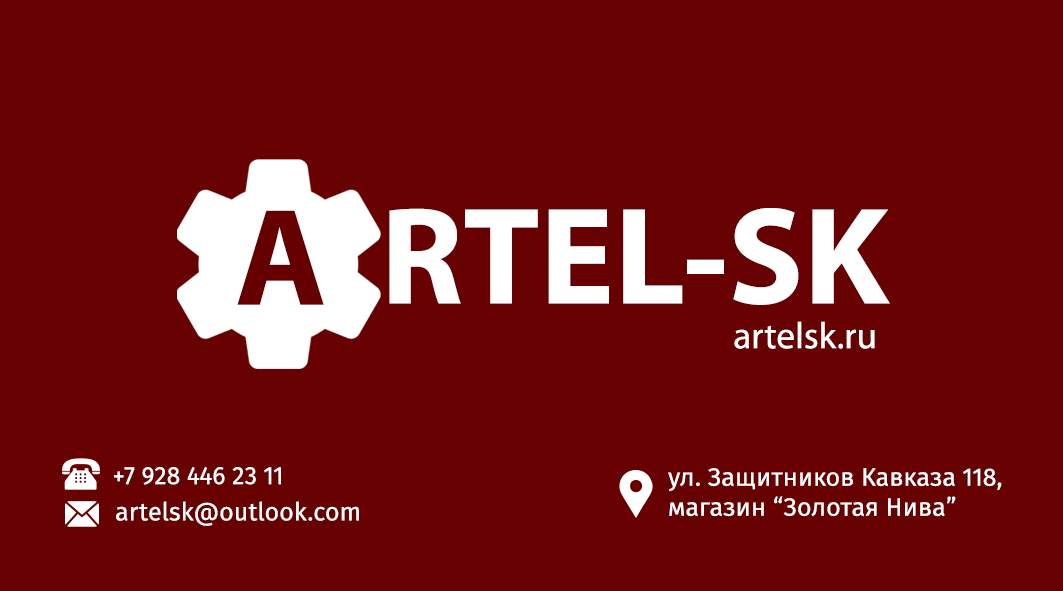
<style>
.page{position:relative;width:1063px;height:591px;background:#670000}
.page>*{position:absolute;margin:0}
.t1{font:139.3px "MyriadPro-Bold";color:#ffffff}
.t2{font:139.3px "MyriadPro-Bold";color:#660000}
.t3{font:37.1px "MyriadPro-Regular";color:#ffffff}
.t4{font:25px "FiraSans";color:#ffffff}
</style>
<div class="page">
<p class="t1" style="left:389px;top:208px;width:501px;height:97px">RTEL-SK</p>
<p class="t2" style="left:237px;top:210px;width:87px;height:95px">A</p>
<p class="t3" style="left:734px;top:321px;width:141px;height:28px">artelsk.ru</p>
<p class="t4" style="left:114px;top:467px;width:167px;height:18px">+7 928 446 23 11</p>
<p class="t4" style="left:668px;top:468px;width:334px;height:49px">ул. Защитников Кавказа 118,<br>магазин “Золотая Нива”</p>
<p class="t4" style="left:116px;top:501px;width:243px;height:25px">artelsk@outlook.com</p>
</div>
